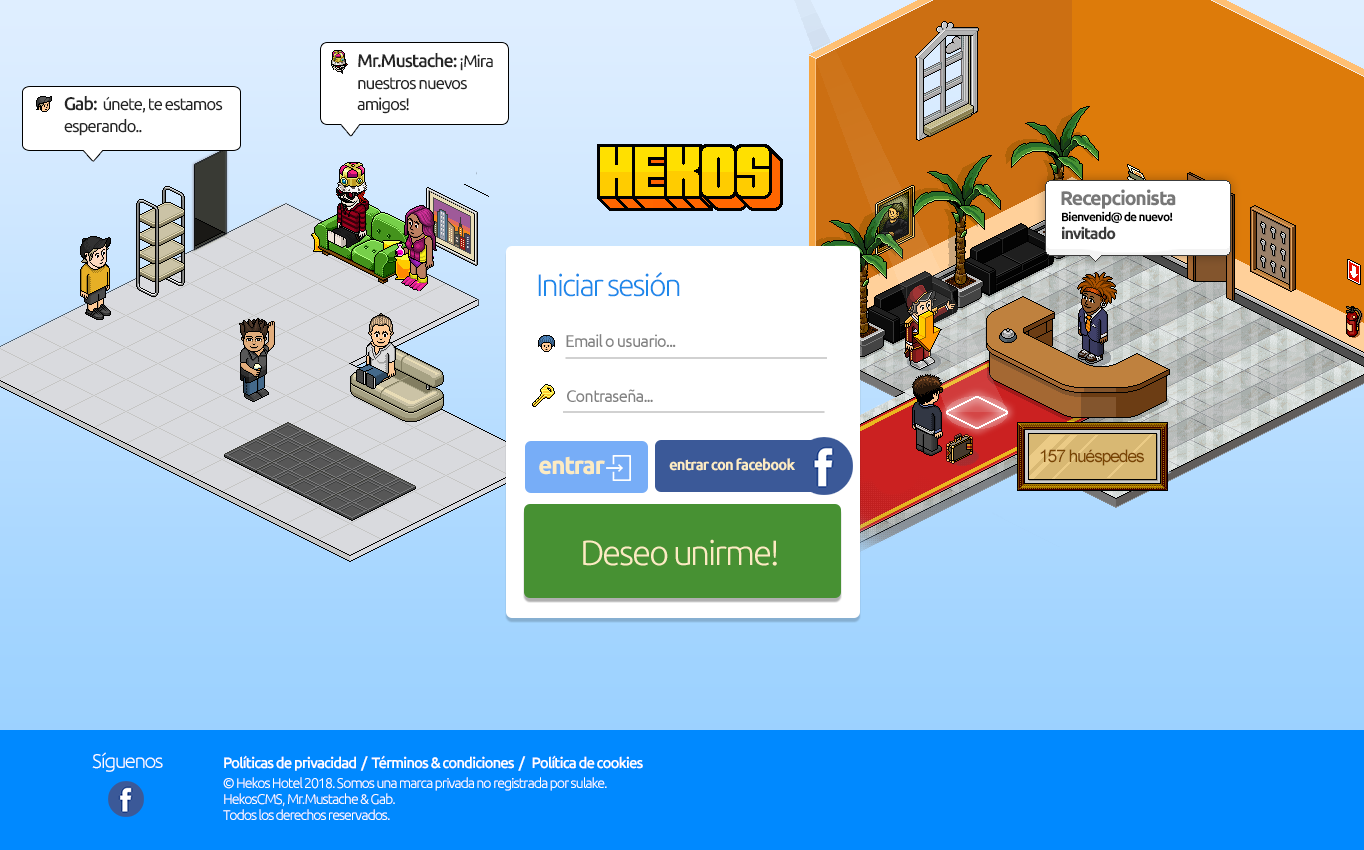
<style>
.page{position:relative;width:1364px;height:850px}
.page>*{position:absolute;margin:0}
.t1{font:17px/21.2px "Ubuntu";letter-spacing:-0.065em;color:#252525}
.t2{font:18.2px/21.2px "Ubuntu-Medium";letter-spacing:-0.065em;color:#252525}
.t3{font:20px "Ubuntu-Bold";letter-spacing:-0.065em;color:#777777}
.t4{font:12px "Ubuntu-Bold";letter-spacing:-0.065em;color:#000000}
.t5{font:15.9px "Ubuntu-Bold";letter-spacing:-0.065em;color:#3b3b3b}
.t6{font:30.9px "Ubuntu-Light";letter-spacing:-0.065em;color:#1e88ea}
.t7{font:17.1px "Ubuntu";letter-spacing:-0.065em;color:#818181}
.t8{font:17.3px "ArialMT";letter-spacing:-0.065em;color:#794400}
.t9{font:25px "Ubuntu-Bold";letter-spacing:-0.065em;color:#fcebc2}
.t10{font:15px "Ubuntu-Bold";letter-spacing:-0.065em;color:#fcebc2}
.t11{font:35px "Ubuntu-Light";letter-spacing:-0.065em;color:#fcebc2}
.t12{font:20px "Ubuntu-Light";letter-spacing:-0.065em;color:#ffffff}
.t13{font:15px/20px "Ubuntu-Medium";letter-spacing:-0.065em;color:#ffffff}
.t14{font:14px/20px "Ubuntu-Light";letter-spacing:-0.065em;color:#ffffff}
.t15{font:14px/16px "Ubuntu-Light";letter-spacing:-0.065em;color:#ffffff}
</style>
<div class="page">
<p class="t1" style="left:357px;top:52px;width:136px;height:62px"><span class="t2">Mr.Mustache: </span>¡Mira <br>nuestros nuevos <br>amigos!</p>
<p class="t1" style="left:64px;top:95px;width:159px;height:41px"><span class="t2">Gab: </span> únete, te estamos<br>esperando..</p>
<p class="t3" style="left:1061px;top:189px;width:115px;height:20px">Recepcionista</p>
<p class="t4" style="left:1062px;top:211px;width:111px;height:12px">Bienvenid@ de nuevo!</p>
<p class="t5" style="left:1062px;top:226px;width:54px;height:14px">invitado</p>
<p class="t6" style="left:538px;top:272px;width:142px;height:25px">Iniciar sesión</p>
<p class="t7" style="left:566px;top:334px;width:110px;height:13px">Email o usuario...</p>
<p class="t7" style="left:567px;top:389px;width:86px;height:13px">Contraseña...</p>
<p class="t8" style="left:1040px;top:449px;width:104px;height:17px">157 huéspedes</p>
<p class="t9" style="left:539px;top:456px;width:66px;height:19px">entrar</p>
<p class="t10" style="left:669px;top:458px;width:126px;height:13px">entrar con facebook</p>
<p class="t11" style="left:583px;top:539px;width:194px;height:27px">Deseo unirme!</p>
<p class="t12" style="left:92px;top:752px;width:71px;height:20px">Síguenos</p>
<p class="t13" style="left:223px;top:755px;width:420px;height:65px">Políticas de privacidad  /  Términos &amp; condiciones  /   Política de cookies<br><span class="t14">© Hekos Hotel 2018. Somos una marca privada no registrada por sulake. <br></span><span class="t15">HekosCMS, Mr.Mustache &amp; Gab.<br>Todos los derechos reservados.</span></p>
</div>
